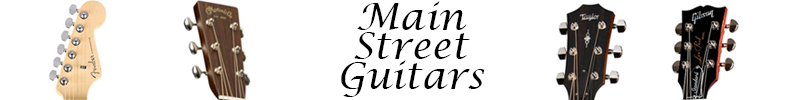
<style>
.page{position:relative;width:800px;height:100px;background:#ffffff}
.page>*{position:absolute;margin:0}
.t1{font:37px/29.6px "LucidaCalligraphy-Italic";color:#000000}
</style>
<div class="page">
<p class="t1" style="left:341px;top:1px;width:144px;height:96px;text-align:center">Main<br>Street<br>Guitars</p>
</div>
